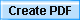
<style>
.page{position:relative;width:80px;height:20px;background:#bbdffc}
.page>*{position:absolute;margin:0}
.t1{font:12px "Arial-BoldMT";color:#101010}
</style>
<div class="page">
<p class="t1" style="left:9px;top:6px;width:62px;height:9px">Create PDF</p>
</div>
